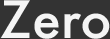
<style>
.page{position:relative;width:110px;height:39px;background:#333333}
.page>*{position:absolute;margin:0}
.t1{font:50px "Futura-Medium";color:#ffffff;scale:1.05 1}
</style>
<div class="page">
<p class="t1" style="left:0px;top:0px;width:110px;height:39px;opacity:0.95">Zero</p>
</div>
